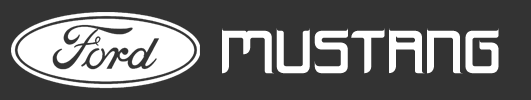
<style>
.page{position:relative;width:531px;height:100px;background:#333333}
.page>*{position:absolute;margin:0}
.t1{font:71px "Foxtail-Regular";color:#ffffff}
</style>
<div class="page">
<p class="t1" style="left:222px;top:28px;width:277px;height:46px">MUSTANG</p>
</div>
